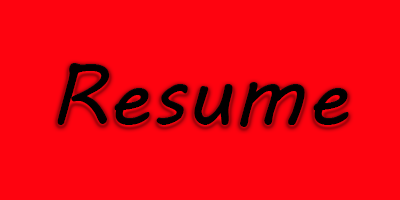
<style>
.page{position:relative;width:400px;height:200px;background:#fe030f}
.page>*{position:absolute;margin:0}
.t1{font:85.4px "MVBoli";color:#010000}
</style>
<div class="page">
<p class="t1" style="left:57px;top:63px;width:292px;height:64px">Resume</p>
</div>
